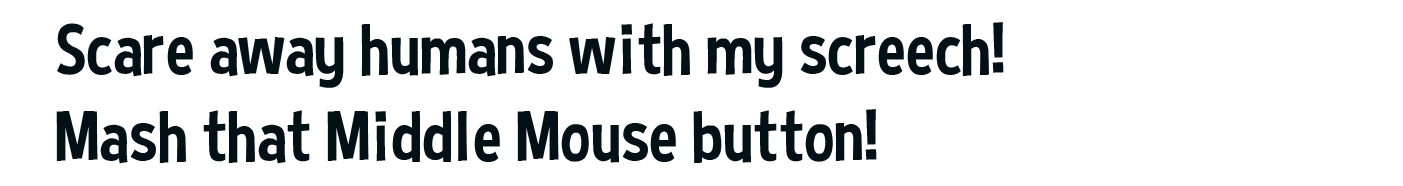
<style>
.page{position:relative;width:1403px;height:186px;background:#ffffff}
.page>*{position:absolute;margin:0}
.t1{font:72px "CurseCasualRegular";color:#031015}
</style>
<div class="page">
<p class="t1" style="left:56px;top:22px;width:948px;height:142px">Scare away humans with my screech!<br>Mash that Middle Mouse button!</p>
</div>
